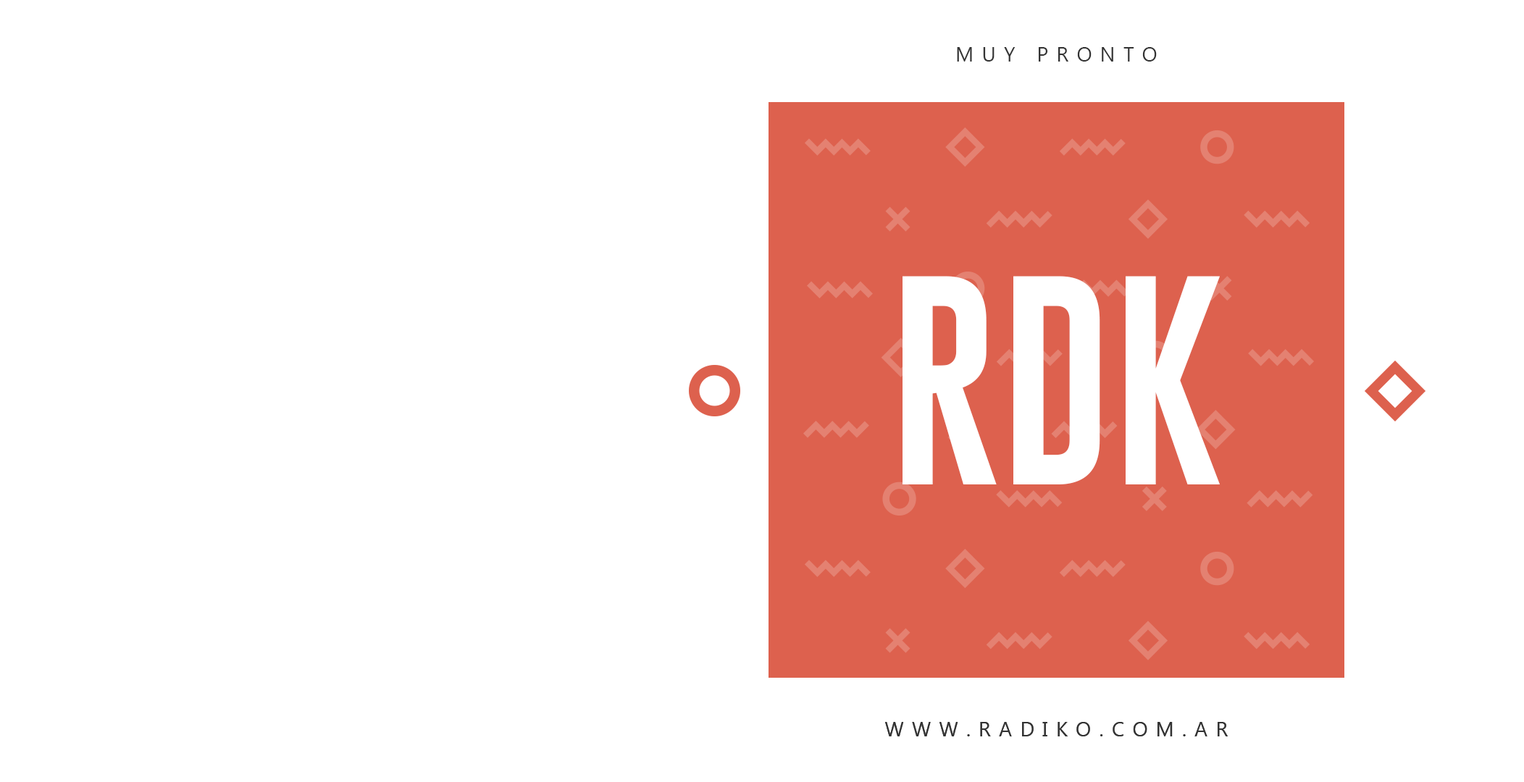
<style>
.page{position:relative;width:1524px;height:782px;background:#ffffff}
.page>*{position:absolute;margin:0}
.t1{font:20.3px "Ebrima";letter-spacing:0.4em;color:#333333;text-transform:uppercase}
.t2{font:217.3px "Gobold";color:#ffffff;text-transform:uppercase}
</style>
<div class="page">
<p class="t1" style="left:957px;top:47px;width:200px;height:15px">muy pronto</p>
<p class="t2" style="left:903px;top:276px;width:317px;height:209px">rdk</p>
<p class="t1" style="left:885px;top:722px;width:343px;height:15px">www.radiko.com.ar</p>
<p class="t1" style="left:885px;top:722px;width:343px;height:15px">www.radiko.com.ar</p>
</div>
